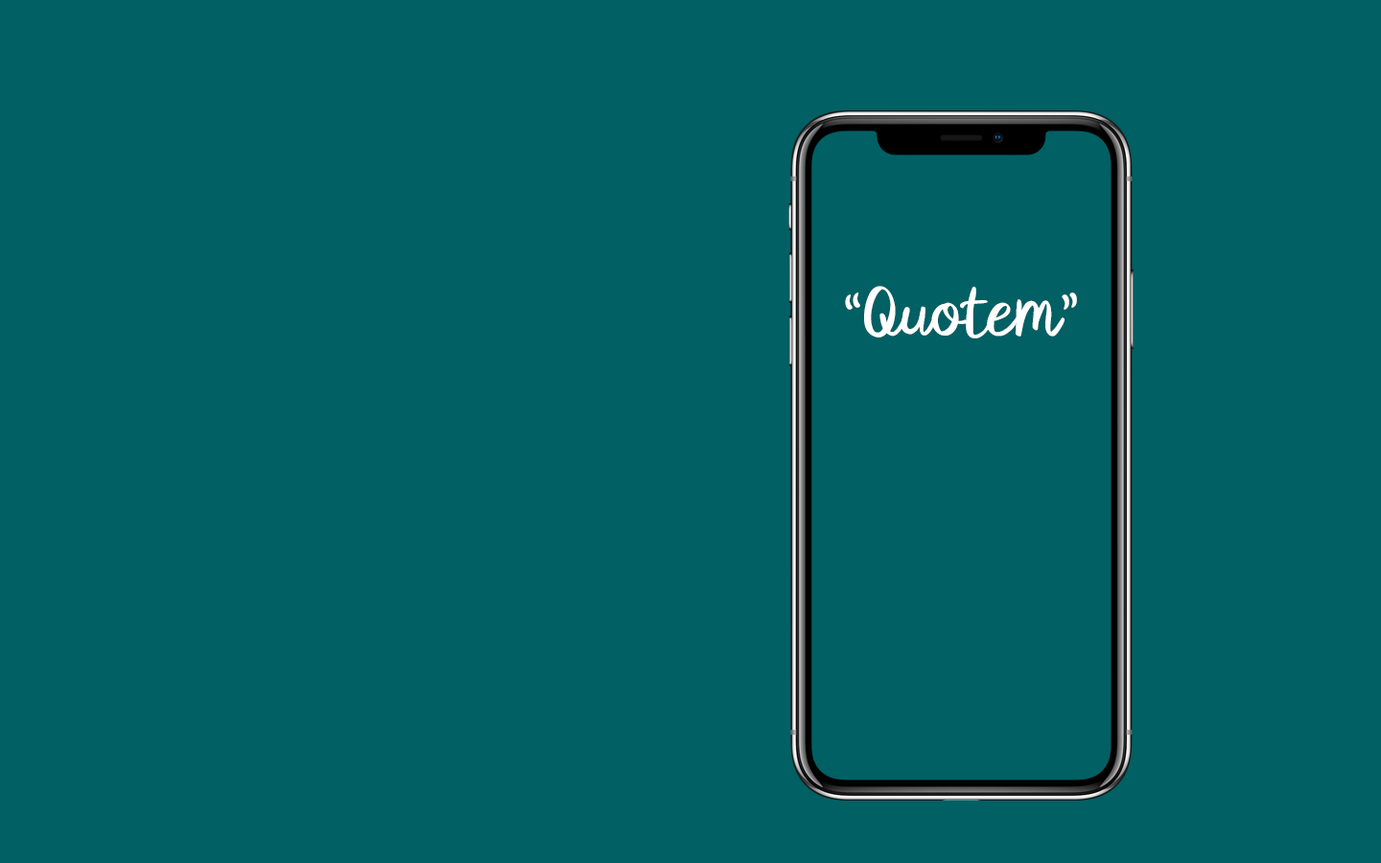
<style>
.page{position:relative;width:1381px;height:863px;background:#006064}
.page>*{position:absolute;margin:0}
.t1{font:62.7px "KGSatisfiedScript";color:#ffffff}
</style>
<div class="page">
<p class="t1" style="left:845px;top:286px;width:232px;height:53px">“Quotem”</p>
</div>
